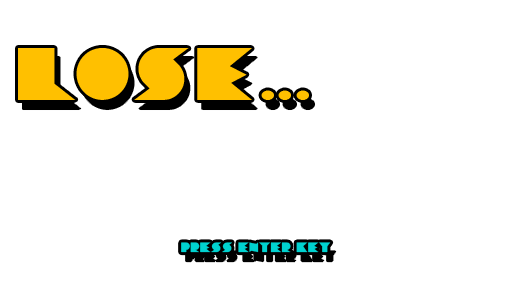
<style>
.page{position:relative;width:512px;height:288px;background:#ffffff}
.page>*{position:absolute;margin:0}
.t1{font:72px "ChainsawGeometric";letter-spacing:0.1em;color:#ffc000}
.t2{font:72px "ChainsawGeometric";letter-spacing:0.1em;color:#ffc000;scale:0.5 1}
.t3{font:13.1px "ChainsawGeometric";letter-spacing:0.05em;color:#00d2d0}
</style>
<div class="page">
<p class="t1" style="left:18px;top:48px;width:291px;height:52px">LOSE<span class="t2">...</span></p>
<p class="t3" style="left:181px;top:242px;width:150px;height:11px">PRESS ENTER KEY</p>
</div>
